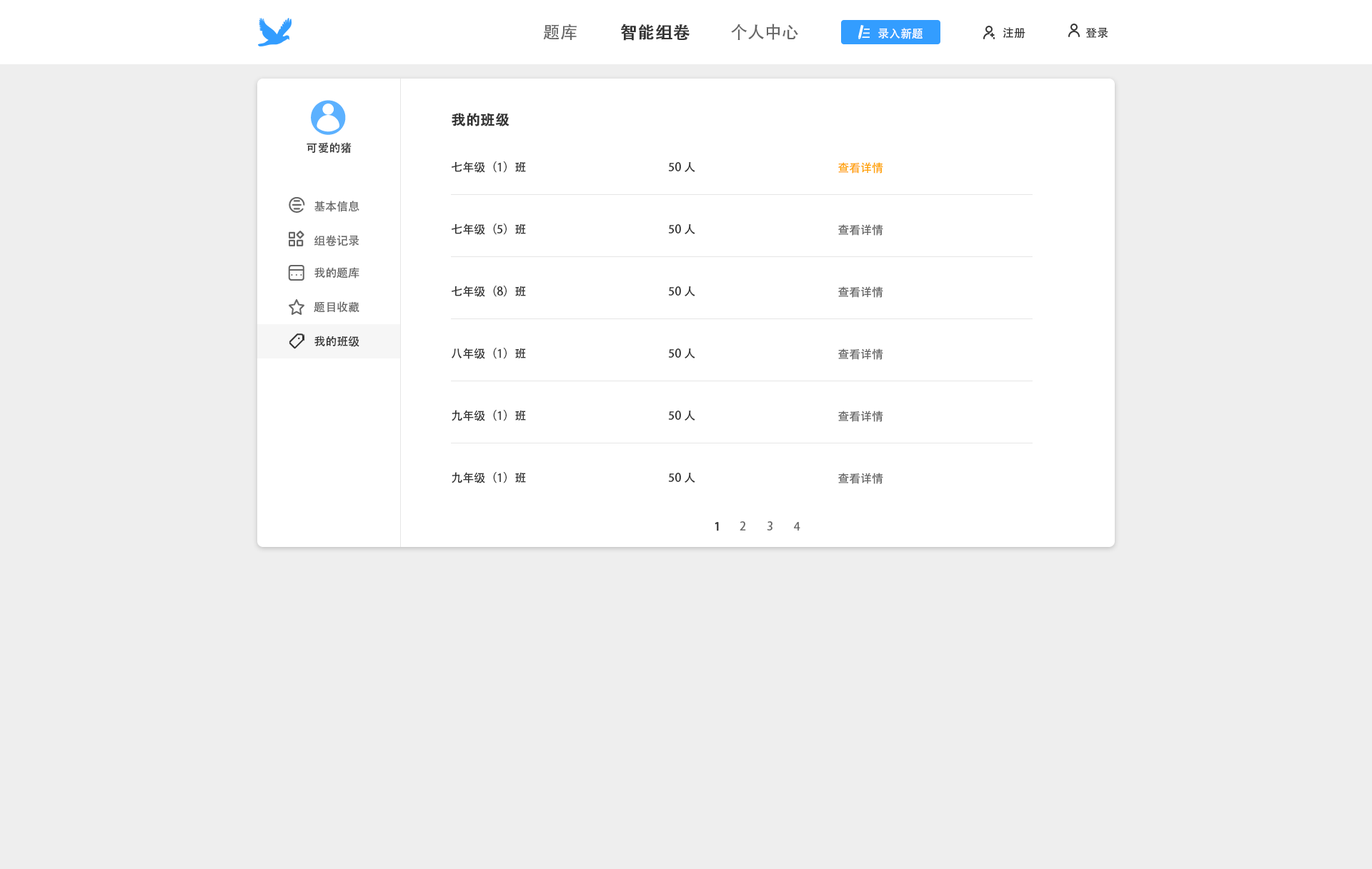
<style>
.page{position:relative;width:1372px;height:869px;background:#eeeeee}
.page>*{position:absolute;margin:0}
.t1{font:17.1px "AdobeHeitiStd-Regular";color:#666666}
.t2{font:17.1px "AdobeHeitiStd-Regular";color:#333333;font-weight:bold}
.t3{font:11.4px "AdobeHeitiStd-Regular";color:#ffffff}
.t4{font:11.4px "AdobeHeitiStd-Regular";color:#333333}
.t5{font:14.3px "AdobeHeitiStd-Regular";color:#333333;font-weight:bold}
.t6{font:11.4px "AdobeHeitiStd-Regular";color:#ffa200}
.t7{font:11.4px "AdobeHeitiStd-Regular";color:#666666}
.t8{font:11.4px "AdobeHeitiStd-Regular";color:#333333;font-weight:bold}
</style>
<div class="page">
<p class="t1" style="left:543px;top:24px;width:33px;height:16px">题库</p>
<p class="t2" style="left:621px;top:24px;width:68px;height:17px">智能组卷</p>
<p class="t1" style="left:731px;top:24px;width:67px;height:16px">个人中心</p>
<p class="t3" style="left:878px;top:28px;width:44px;height:11px">录入新题</p>
<p class="t4" style="left:1002px;top:27px;width:23px;height:12px">注册</p>
<p class="t4" style="left:1085px;top:27px;width:23px;height:12px">登录</p>
<p class="t5" style="left:451px;top:113px;width:58px;height:13px">我的班级</p>
<p class="t4" style="left:306px;top:142px;width:45px;height:12px">可爱的猪</p>
<p class="t4" style="left:451px;top:161px;width:75px;height:12px">七年级（1）班</p>
<p class="t4" style="left:668px;top:162px;width:27px;height:10px">50人</p>
<p class="t6" style="left:838px;top:162px;width:45px;height:12px">查看详情</p>
<p class="t7" style="left:314px;top:201px;width:45px;height:11px">基本信息</p>
<p class="t4" style="left:451px;top:224px;width:75px;height:11px">七年级（5）班</p>
<p class="t4" style="left:668px;top:224px;width:27px;height:10px">50人</p>
<p class="t7" style="left:838px;top:224px;width:45px;height:12px">查看详情</p>
<p class="t7" style="left:314px;top:235px;width:45px;height:11px">组卷记录</p>
<p class="t7" style="left:314px;top:267px;width:45px;height:12px">我的题库</p>
<p class="t4" style="left:451px;top:286px;width:75px;height:11px">七年级（8）班</p>
<p class="t4" style="left:668px;top:286px;width:27px;height:10px">50人</p>
<p class="t7" style="left:838px;top:286px;width:45px;height:12px">查看详情</p>
<p class="t7" style="left:314px;top:301px;width:45px;height:12px">题目收藏</p>
<p class="t4" style="left:314px;top:336px;width:45px;height:11px">我的班级</p>
<p class="t4" style="left:451px;top:348px;width:75px;height:11px">八年级（1）班</p>
<p class="t4" style="left:668px;top:349px;width:27px;height:10px">50人</p>
<p class="t7" style="left:838px;top:349px;width:45px;height:11px">查看详情</p>
<p class="t4" style="left:451px;top:410px;width:75px;height:11px">九年级（1）班</p>
<p class="t4" style="left:668px;top:411px;width:27px;height:10px">50人</p>
<p class="t7" style="left:838px;top:411px;width:45px;height:11px">查看详情</p>
<p class="t4" style="left:451px;top:472px;width:75px;height:12px">九年级（1）班</p>
<p class="t4" style="left:668px;top:473px;width:27px;height:10px">50人</p>
<p class="t7" style="left:838px;top:473px;width:45px;height:11px">查看详情</p>
<p class="t7" style="left:739px;top:521px;width:7px;height:10px">2</p>
<p class="t7" style="left:767px;top:521px;width:5px;height:10px">3</p>
<p class="t8" style="left:714px;top:522px;width:5px;height:9px">1</p>
<p class="t7" style="left:794px;top:522px;width:6px;height:9px">4</p>
</div>
